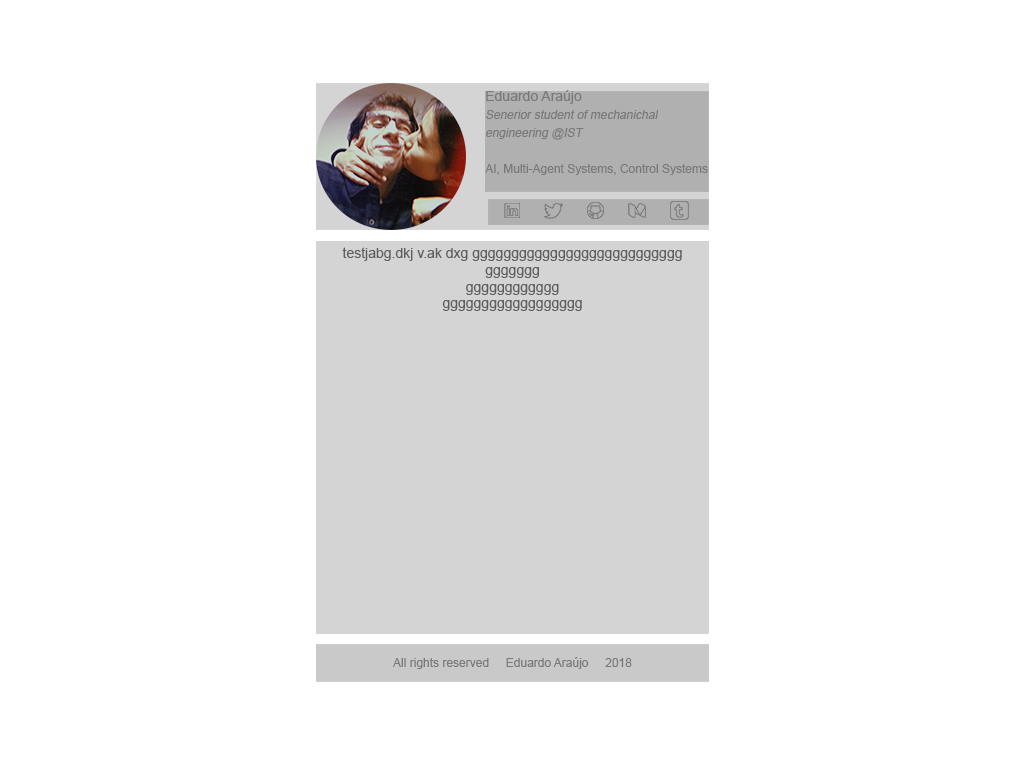
<style>
.page{position:relative;width:1024px;height:768px;background:#ffffff}
.page>*{position:absolute;margin:0}
.t1{font:12px/18px "ArialMT";color:#797979;font-style:italic}
.t2{font:14px/18px "ArialMT";color:#797979}
.t3{font:12px/18px "ArialMT";color:#797979}
.t4{font:14px "ArialMT";color:#5e5e5e}
.t5{font:12px "ArialMT";color:#797979}
</style>
<div class="page">
<p class="t1" style="left:485px;top:90px;width:223px;height:85px"><span class="t2">Eduardo Araújo<br></span>Senerior student of mechanichal engineering @IST<br><br><span class="t3">AI, Multi-Agent Systems, Control Systems</span></p>
<p class="t4" style="left:342px;top:247px;width:340px;height:64px;text-align:center">testjabg.dkj v.ak dxg ggggggggggggggggggggggggggg<br>ggggggg<br>gggggggggggg<br>gggggggggggggggggg</p>
<p class="t5" style="left:393px;top:657px;width:239px;height:12px">All rights reserved     Eduardo Araújo     2018</p>
</div>
